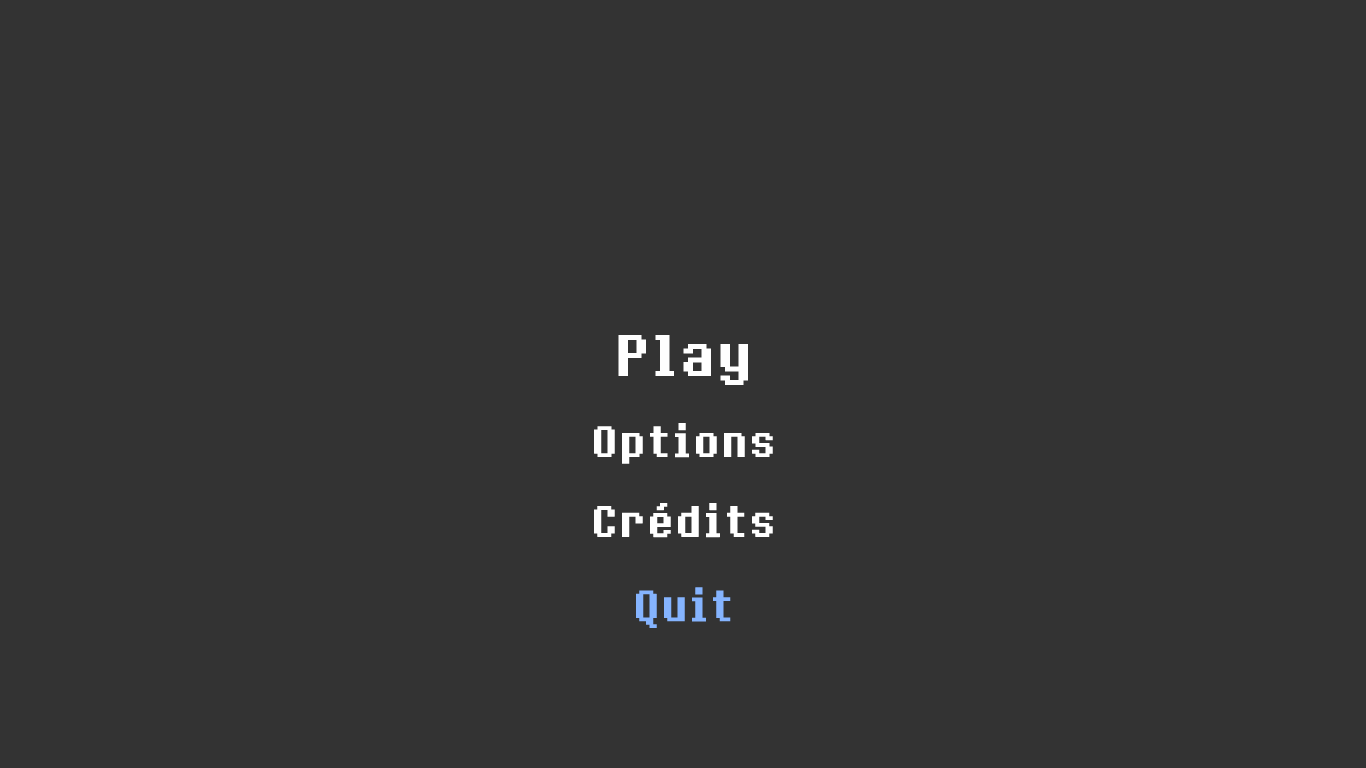
<style>
.page{position:relative;width:1366px;height:768px;background:#333333}
.page>*{position:absolute;margin:0}
.t1{font:48px "8bitoperatorRegular";color:#ffffff;font-weight:bold}
.t2{font:36px "8bitoperatorRegular";color:#ffffff;font-weight:bold}
.t3{font:36px "8bitoperatorRegular";color:#85b4ff;font-weight:bold}
</style>
<div class="page">
<p class="t1" style="left:618px;top:335px;width:130px;height:50px">Play</p>
<p class="t2" style="left:594px;top:423px;width:179px;height:41px">Options</p>
<p class="t2" style="left:594px;top:503px;width:179px;height:35px">Crédits</p>
<p class="t3" style="left:636px;top:587px;width:95px;height:41px">Quit</p>
</div>
